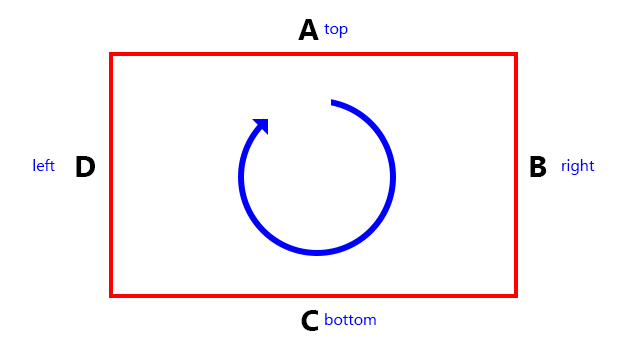
<style>
.page{position:relative;width:626px;height:350px;background:#ffffff}
.page>*{position:absolute;margin:0}
.t1{font:30px "SegoeUI-Bold";color:#000000}
.t2{font:16px "SegoeUI";color:#0000ff}
</style>
<div class="page">
<p class="t1" style="left:298px;top:19px;width:21px;height:21px">A</p>
<p class="t2" style="left:324px;top:24px;width:24px;height:14px">top</p>
<p class="t2" style="left:33px;top:159px;width:22px;height:12px">left</p>
<p class="t1" style="left:76px;top:156px;width:19px;height:21px">D</p>
<p class="t1" style="left:530px;top:156px;width:17px;height:21px">B</p>
<p class="t2" style="left:562px;top:159px;width:33px;height:16px">right</p>
<p class="t1" style="left:301px;top:310px;width:17px;height:21px">C</p>
<p class="t2" style="left:325px;top:313px;width:51px;height:12px">bottom</p>
</div>
